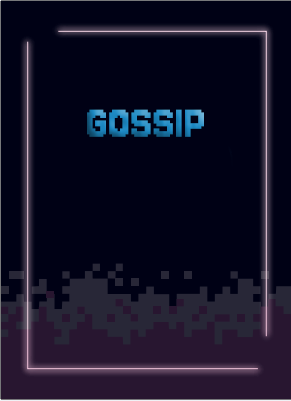
<style>
.page{position:relative;width:291px;height:401px;background:#000115}
.page>*{position:absolute;margin:0}
.t1{font:50px "Jersey10-Regular";letter-spacing:0.025em}
</style>
<div class="page">
<p class="t1" style="left:87px;top:109px;width:117px;height:28px">GOSSIP</p>
</div>
